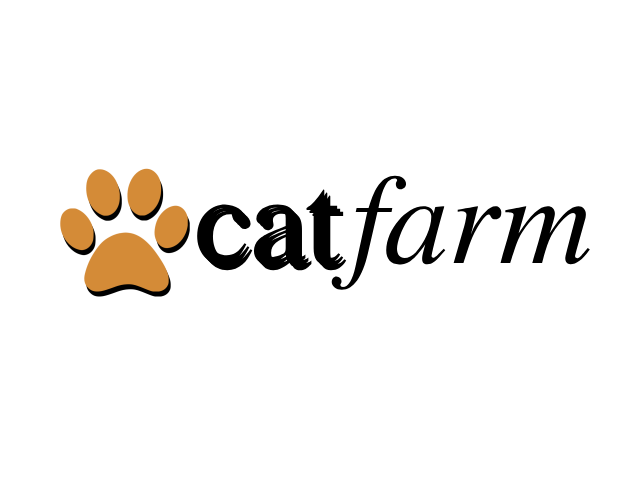
<style>
.page{position:relative;width:640px;height:480px;background:#ffffff}
.page>*{position:absolute;margin:0}
.t1{font:127px "NimbusRomNo9L-RegIta";color:#000000}
.t2{font:127px "NimbusRomNo9L-Reg";color:#000000}
</style>
<div class="page">
<p class="t1" style="left:331px;top:175px;width:259px;height:115px">farm</p>
<p class="t2" style="left:197px;top:189px;width:144px;height:76px">cat</p>
<p class="t2" style="left:200px;top:192px;width:144px;height:76px">cat</p>
<p class="t2" style="left:203px;top:195px;width:144px;height:76px">cat</p>
</div>
